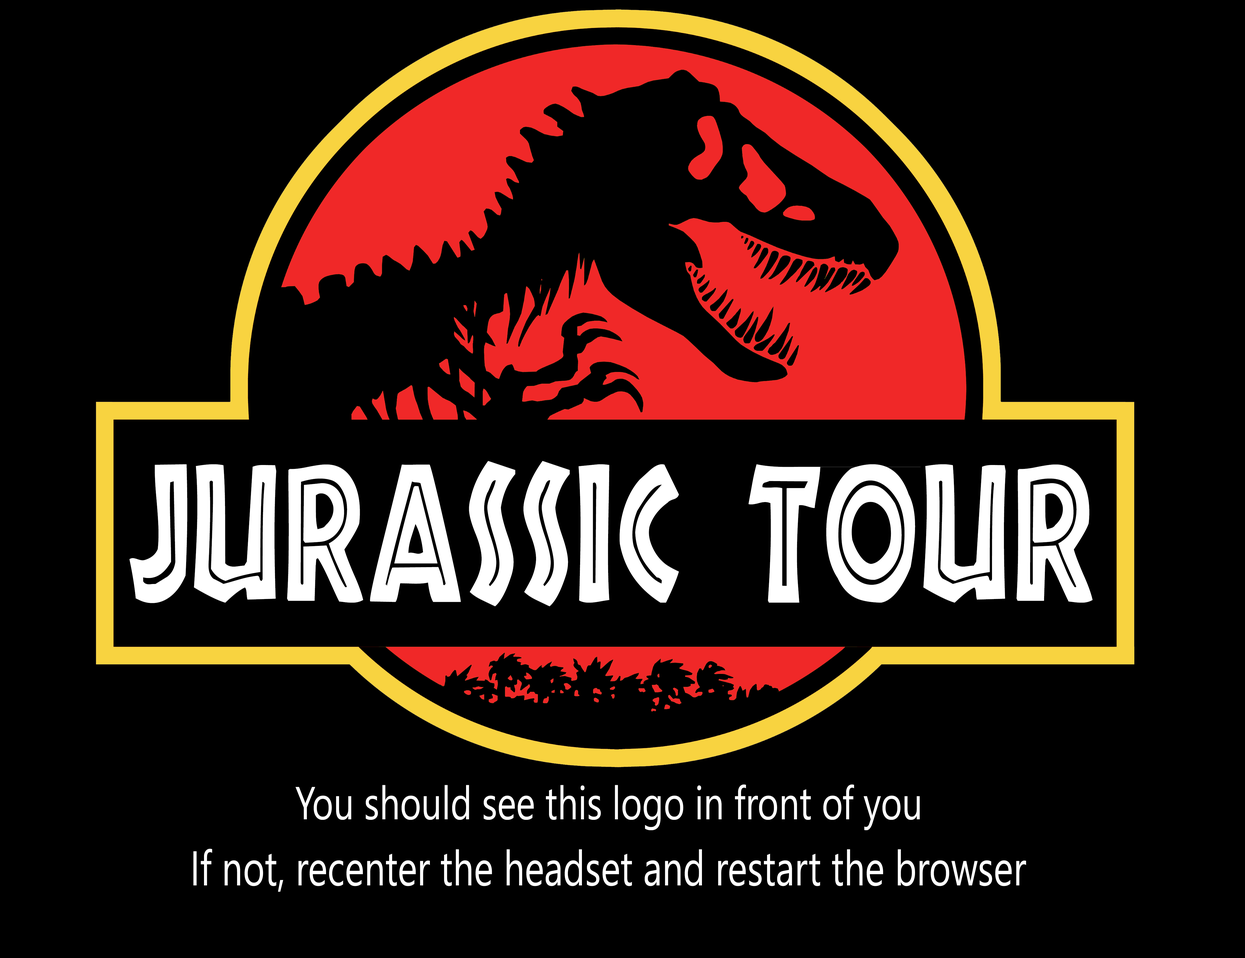
<style>
.page{position:relative;width:1245px;height:958px;background:#000000}
.page>*{position:absolute;margin:0}
.t1{font:181.5px "Tribeca";color:#ffffff;scale:0.62 1}
.t2{font:46.3px "SegoeUISymbol";color:#ffffff;scale:0.78 1}
.t3{font:48.8px "SegoeUISymbol";color:#ffffff;scale:0.76 1}
</style>
<div class="page">
<p class="t1" style="left:129px;top:461px;width:963px;height:145px">JURASSIC TOUR</p>
<p class="t2" style="left:295px;top:784px;width:625px;height:46px">You should see this logo in front of you</p>
<p class="t3" style="left:193px;top:849px;width:833px;height:43px">If not, recenter the headset and restart the browser</p>
</div>
